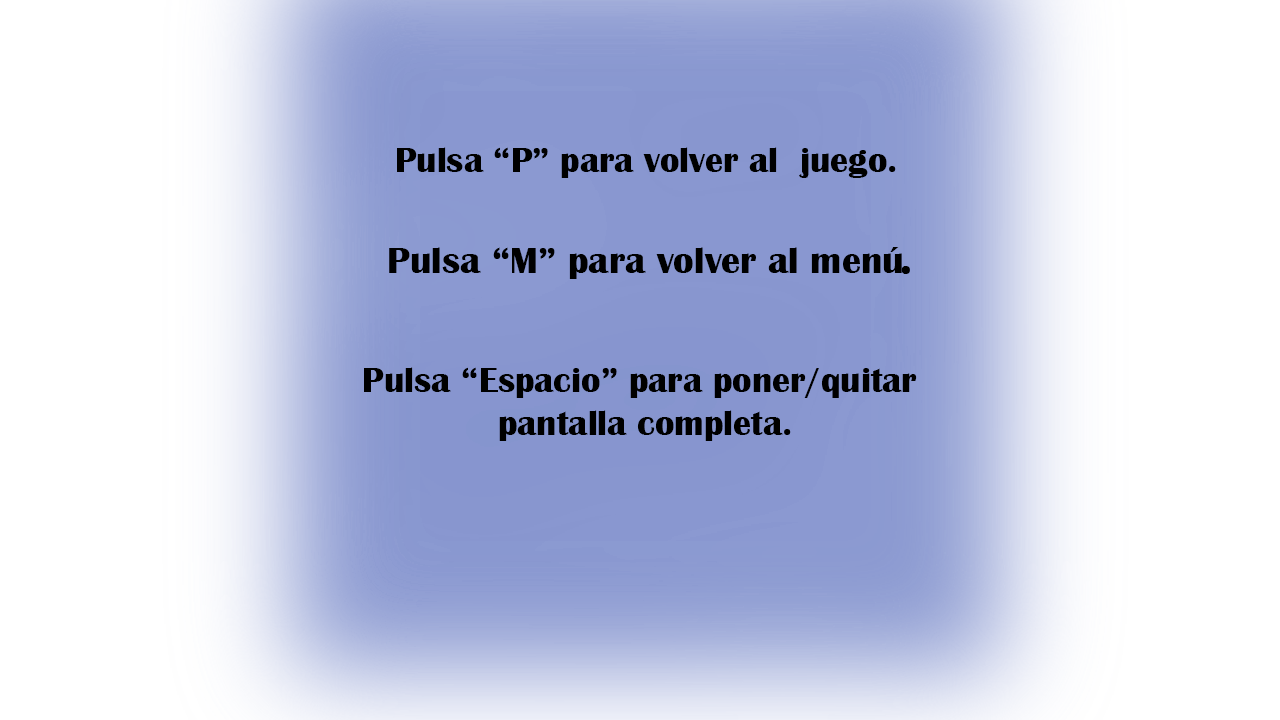
<style>
.page{position:relative;width:1280px;height:720px;background:#ffffff}
.page>*{position:absolute;margin:0}
.t1{font:36px "BritannicBold";color:#000000}
.t2{font:38.2px "BritannicBold";color:#000000}
.t3{font:48px "BritannicBold";color:#000000}
</style>
<div class="page">
<p class="t1" style="left:397px;top:147px;width:499px;height:31px">Pulsa “P” para volver al  juego.</p>
<p class="t2" style="left:389px;top:247px;width:513px;height:32px">Pulsa “M” para volver al menú</p>
<p class="t3" style="left:901px;top:266px;width:9px;height:8px">.</p>
<p class="t1" style="left:364px;top:367px;width:553px;height:74px;text-align:center">Pulsa “Espacio” para poner/quitar <br>pantalla completa.</p>
</div>
